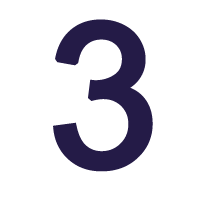
<style>
.page{position:relative;width:200px;height:200px;background:#ffffff}
.page>*{position:absolute;margin:0}
.t1{font:200px "ArialMT";color:#241b47;font-weight:bold}
</style>
<div class="page">
<p class="t1" style="left:53px;top:19px;width:100px;height:153px">3</p>
</div>
